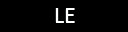
<style>
.page{position:relative;width:128px;height:32px;background:#000000}
.page>*{position:absolute;margin:0}
.t1{font:24px "Calibri";color:#feffff}
</style>
<div class="page">
<p class="t1" style="left:55px;top:8px;width:20px;height:15px">LE</p>
</div>
